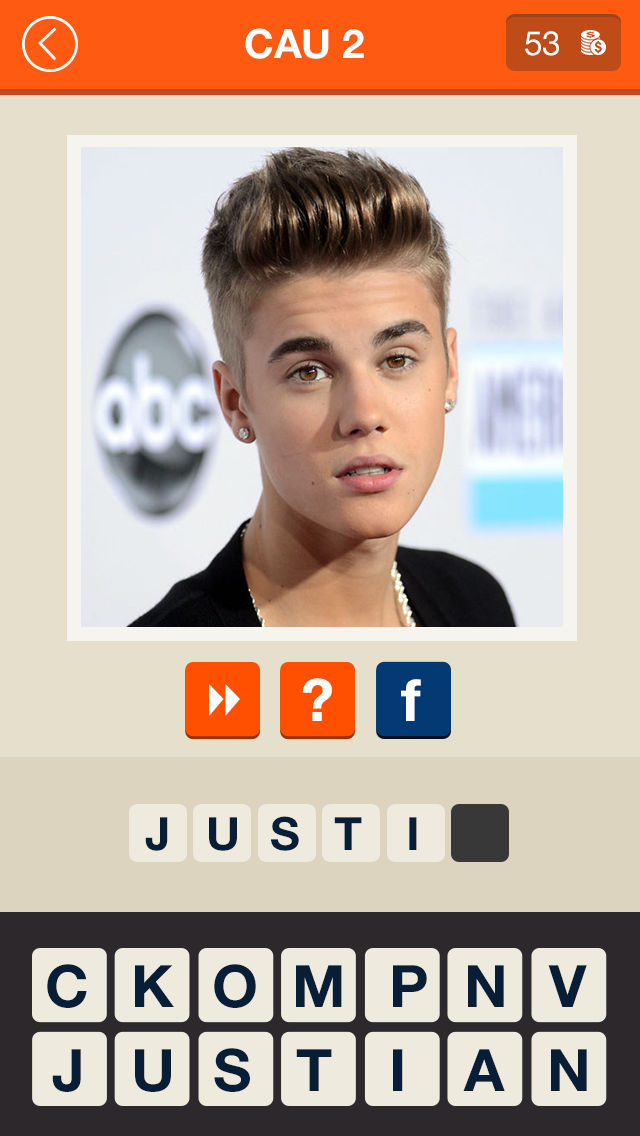
<style>
.page{position:relative;width:640px;height:1136px;background:#e6dfcc}
.page>*{position:absolute;margin:0}
.t1{font:40.3px "HelveticaNeueLTStd-Bd";color:#ffffff}
.t2{font:33.3px "HelveticaNeueLTStd-Roman";color:#ffffff}
.t3{font:58.6px "HelveticaNeueLTStd-Bd";color:#fefeff}
.t4{font:58.6px "HelveticaNeueLTStd-Bd";color:#ffffff}
.t5{font:45.8px "HelveticaNeueLTStd-Bd";color:#071e36}
.t6{font:58.6px "HelveticaNeueLTStd-Bd";color:#071e36}
</style>
<div class="page">
<p class="t1" style="left:245px;top:28px;width:119px;height:31px">CAU 2</p>
<p class="t2" style="left:525px;top:31px;width:34px;height:25px">53</p>
<p class="t3" style="left:302px;top:678px;width:30px;height:43px">?</p>
<p class="t4" style="left:401px;top:679px;width:20px;height:42px">f</p>
<p class="t5" style="left:145px;top:817px;width:23px;height:34px">J</p>
<p class="t5" style="left:209px;top:817px;width:28px;height:34px">U</p>
<p class="t5" style="left:271px;top:816px;width:28px;height:35px">S</p>
<p class="t5" style="left:334px;top:817px;width:28px;height:33px">T</p>
<p class="t5" style="left:409px;top:817px;width:8px;height:33px">I</p>
<p class="t6" style="left:47px;top:964px;width:40px;height:44px">C</p>
<p class="t6" style="left:135px;top:965px;width:39px;height:42px">K</p>
<p class="t6" style="left:214px;top:964px;width:42px;height:44px">O</p>
<p class="t6" style="left:296px;top:965px;width:46px;height:42px">M</p>
<p class="t6" style="left:393px;top:965px;width:34px;height:42px">P</p>
<p class="t6" style="left:468px;top:965px;width:36px;height:42px">N</p>
<p class="t6" style="left:548px;top:965px;width:39px;height:42px">V</p>
<p class="t6" style="left:52px;top:1049px;width:29px;height:43px">J</p>
<p class="t6" style="left:135px;top:1049px;width:36px;height:43px">U</p>
<p class="t6" style="left:214px;top:1048px;width:36px;height:44px">S</p>
<p class="t6" style="left:296px;top:1049px;width:36px;height:42px">T</p>
<p class="t6" style="left:393px;top:1049px;width:10px;height:42px">I</p>
<p class="t6" style="left:463px;top:1049px;width:42px;height:42px">A</p>
<p class="t6" style="left:551px;top:1049px;width:36px;height:42px">N</p>
</div>
